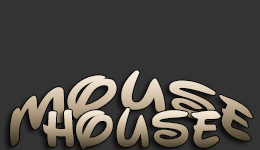
<style>
.page{position:relative;width:260px;height:150px;background:#333333}
.page>*{position:absolute;margin:0}
.t1{font:51.9px "WaltographUI-Bold";scale:1.28 1}
.t2{font:52.1px "WaltographUI-Bold"}
</style>
<div class="page">
<p class="t1" style="left:9px;top:70px;width:244px;height:77px">mouse</p>
<p class="t2" style="left:43px;top:108px;width:178px;height:42px">House</p>
</div>
